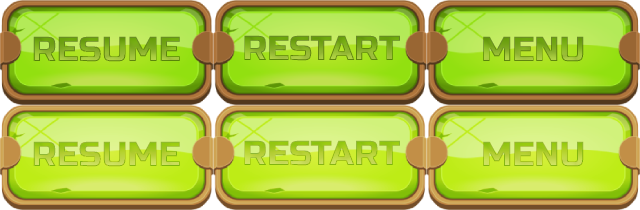
<style>
.page{position:relative;width:640px;height:210px}
.page>*{position:absolute;margin:0}
.t1{font:34.5px "RussoOne-Regular"}
</style>
<div class="page">
<p class="t1" style="left:33px;top:36px;width:147px;height:26px">RESUME</p>
<p class="t1" style="left:244px;top:35px;width:156px;height:26px">RESTART</p>
<p class="t1" style="left:483px;top:36px;width:101px;height:26px">MENU</p>
<p class="t1" style="left:33px;top:141px;width:147px;height:26px">RESUME</p>
<p class="t1" style="left:244px;top:140px;width:156px;height:26px">RESTART</p>
<p class="t1" style="left:483px;top:141px;width:101px;height:26px">MENU</p>
</div>
